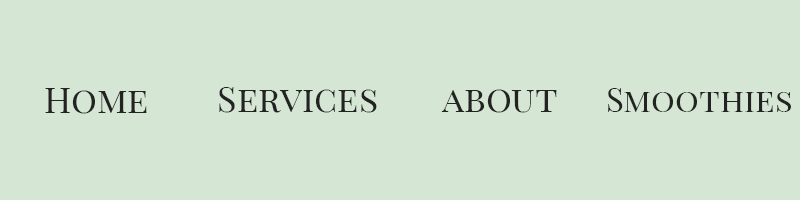
<style>
.page{position:relative;width:800px;height:200px;background:#d5e6d5}
.page>*{position:absolute;margin:0}
.t1{font:36px "PlayfairDisplay-Regular";color:#232422;font-variant:small-caps}
.t2{font:33px "PlayfairDisplay-Regular";color:#232422;font-variant:small-caps}
</style>
<div class="page">
<p class="t1" style="left:45px;top:88px;width:102px;height:26px">Home</p>
<p class="t1" style="left:219px;top:87px;width:158px;height:26px">Services</p>
<p class="t1" style="left:441px;top:89px;width:116px;height:24px">about</p>
<p class="t2" style="left:608px;top:88px;width:183px;height:24px">Smoothies</p>
</div>
